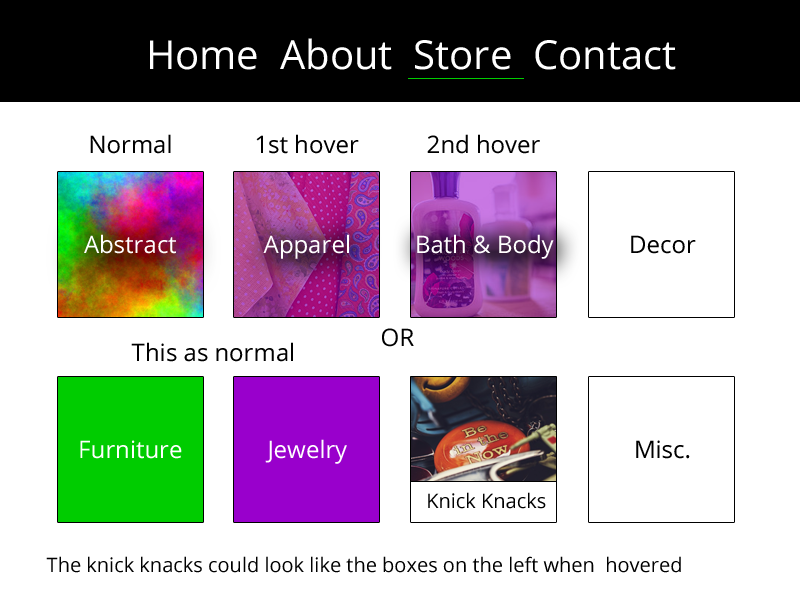
<style>
.page{position:relative;width:800px;height:600px;background:#ffffff}
.page>*{position:absolute;margin:0}
.t1{font:40px "OpenSans";color:#ffffff}
.t2{font:40px "OpenSans";color:#000000}
.t3{font:24px "OpenSans";color:#000000}
.t4{font:24px "OpenSans";color:#ffffff}
.t5{font:20px "OpenSans";color:#000000}
</style>
<div class="page">
<p class="t1" style="left:150px;top:38px;width:526px;height:32px">Home  About  Store  Contac<span class="t2">t</span></p>
<p class="t3" style="left:90px;top:134px;width:81px;height:20px">Normal</p>
<p class="t3" style="left:256px;top:134px;width:103px;height:20px">1st hover</p>
<p class="t3" style="left:427px;top:134px;width:113px;height:20px">2nd hover</p>
<p class="t4" style="left:84px;top:234px;width:92px;height:20px">Abstract</p>
<p class="t4" style="left:263px;top:234px;width:86px;height:25px">Apparel</p>
<p class="t4" style="left:417px;top:234px;width:137px;height:25px">Bath &amp; Body</p>
<p class="t3" style="left:631px;top:235px;width:65px;height:19px">Decor</p>
<p class="t3" style="left:382px;top:328px;width:32px;height:19px">OR</p>
<p class="t3" style="left:131px;top:342px;width:162px;height:20px">This as normal</p>
<p class="t4" style="left:80px;top:440px;width:102px;height:19px">Furniture</p>
<p class="t4" style="left:265px;top:439px;width:82px;height:25px">Jewelry</p>
<p class="t3" style="left:636px;top:440px;width:54px;height:19px">Misc.</p>
<p class="t5" style="left:428px;top:492px;width:118px;height:17px">Knick Knacks</p>
<p class="t5" style="left:46px;top:556px;width:635px;height:17px">The knick knacks could look like the boxes on the left when  hovered</p>
</div>
